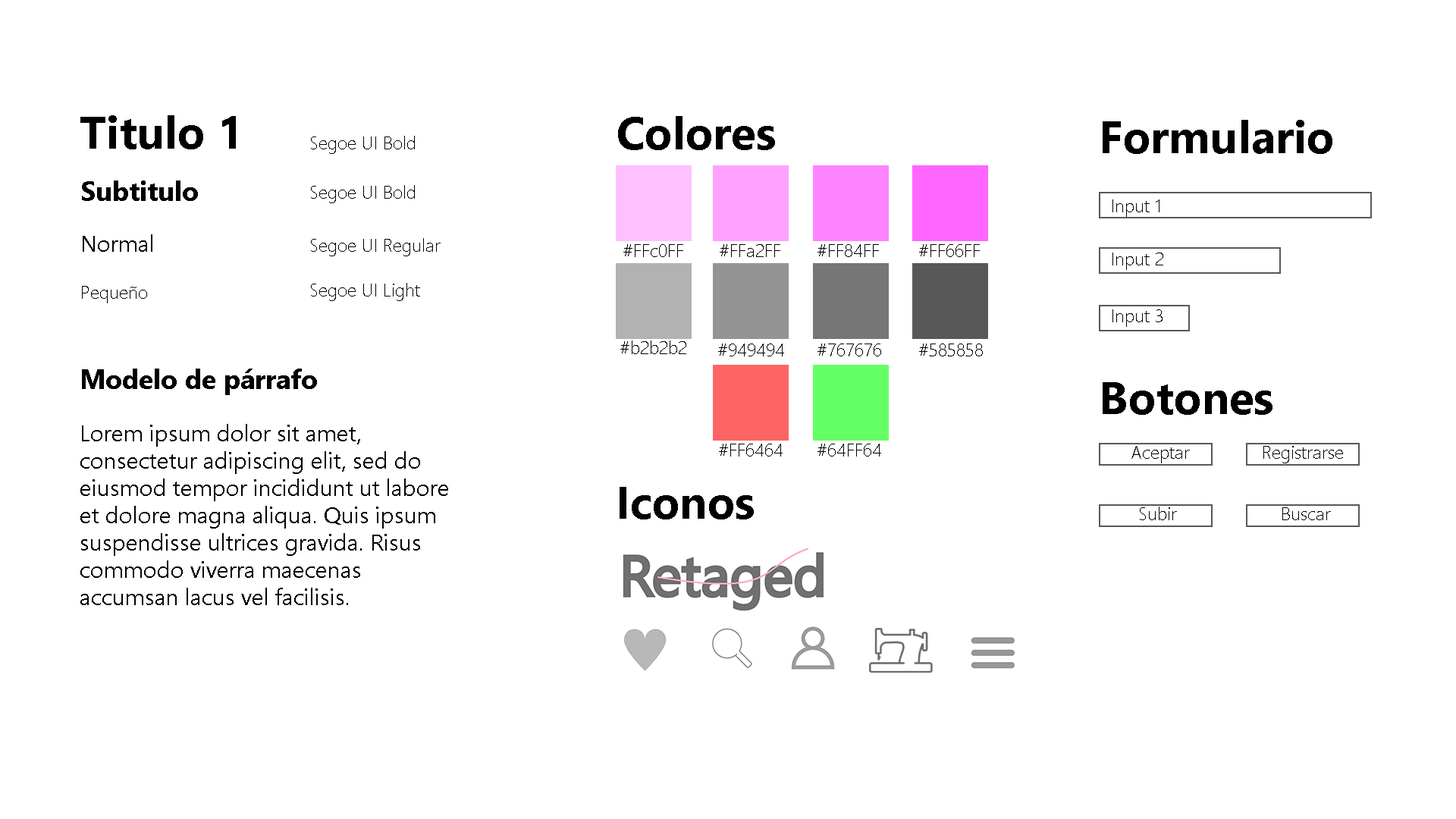
<style>
.page{position:relative;width:1456px;height:819px;background:#ffffff}
.page>*{position:absolute;margin:0}
.t1{font:45.5px "SegoeUI-Bold";color:#000000}
.t2{font:18.2px "SegoeUI-Light";color:#000000}
.t3{font:27.3px "SegoeUI-Bold";color:#000000}
.t4{font:22.7px "SegoeUI";color:#000000}
</style>
<div class="page">
<p class="t1" style="left:80px;top:115px;width:156px;height:34px">Titulo 1</p>
<p class="t1" style="left:618px;top:116px;width:157px;height:34px">Colores</p>
<p class="t1" style="left:1103px;top:120px;width:229px;height:34px">Formulario</p>
<p class="t2" style="left:311px;top:136px;width:104px;height:18px">Segoe UI Bold</p>
<p class="t3" style="left:82px;top:180px;width:116px;height:21px">Subtitulo</p>
<p class="t2" style="left:311px;top:185px;width:104px;height:18px">Segoe UI Bold</p>
<p class="t2" style="left:1112px;top:199px;width:47px;height:18px">Input 1</p>
<p class="t4" style="left:83px;top:234px;width:69px;height:18px">Normal</p>
<p class="t2" style="left:311px;top:238px;width:130px;height:18px">Segoe UI Regular</p>
<p class="t2" style="left:623px;top:244px;width:60px;height:13px">#FFc0FF</p>
<p class="t2" style="left:720px;top:244px;width:60px;height:13px">#FFa2FF</p>
<p class="t2" style="left:817px;top:244px;width:62px;height:13px">#FF84FF</p>
<p class="t2" style="left:919px;top:244px;width:61px;height:13px">#FF66FF</p>
<p class="t2" style="left:1112px;top:253px;width:51px;height:17px">Input 2</p>
<p class="t2" style="left:82px;top:286px;width:65px;height:17px">Pequeño</p>
<p class="t2" style="left:311px;top:283px;width:109px;height:18px">Segoe UI Light</p>
<p class="t2" style="left:1112px;top:309px;width:51px;height:18px">Input 3</p>
<p class="t2" style="left:620px;top:340px;width:66px;height:14px">#b2b2b2</p>
<p class="t2" style="left:718px;top:344px;width:66px;height:12px">#949494</p>
<p class="t2" style="left:817px;top:344px;width:64px;height:12px">#767676</p>
<p class="t2" style="left:919px;top:344px;width:64px;height:12px">#585858</p>
<p class="t3" style="left:82px;top:369px;width:235px;height:26px">Modelo de párrafo</p>
<p class="t1" style="left:1103px;top:382px;width:169px;height:33px">Botones</p>
<p class="t4" style="left:80px;top:424px;width:368px;height:181px">Lorem ipsum dolor sit amet, consectetur adipiscing elit, sed do eiusmod tempor incididunt ut labore et dolore magna aliqua. Quis ipsum suspendisse ultrices gravida. Risus commodo viverra maecenas accumsan lacus vel facilisis.</p>
<p class="t2" style="left:719px;top:444px;width:64px;height:13px">#FF6464</p>
<p class="t2" style="left:817px;top:444px;width:64px;height:13px">#64FF64</p>
<p class="t2" style="left:1131px;top:446px;width:59px;height:17px">Aceptar</p>
<p class="t2" style="left:1263px;top:446px;width:80px;height:17px">Registrarse</p>
<p class="t1" style="left:620px;top:487px;width:134px;height:32px">Iconos</p>
<p class="t2" style="left:1140px;top:507px;width:37px;height:13px">Subir</p>
<p class="t2" style="left:1282px;top:507px;width:49px;height:13px">Buscar</p>
</div>
